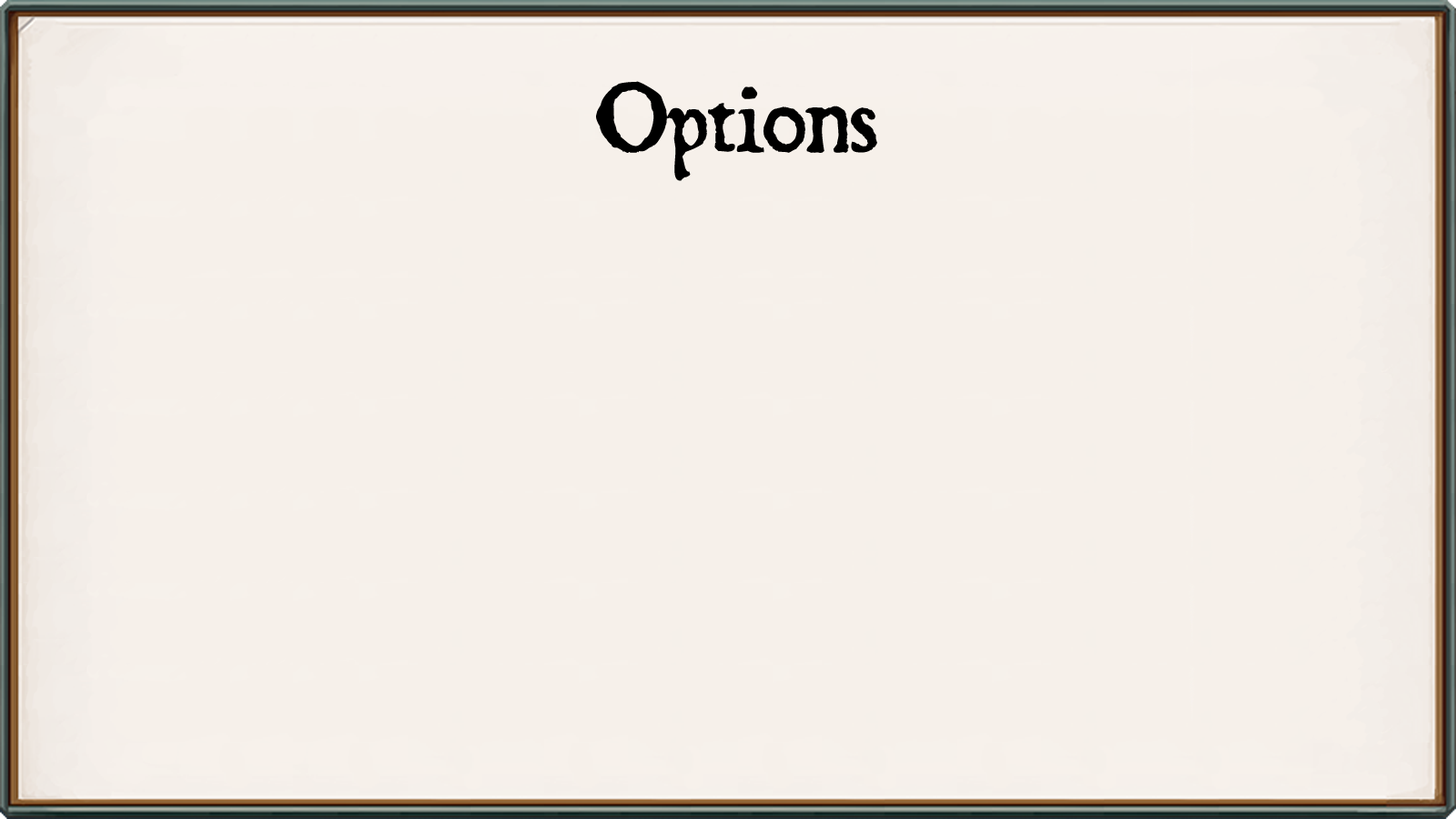
<style>
.page{position:relative;width:1456px;height:819px;background:#f6f0ea}
.page>*{position:absolute;margin:0}
.t1{font:83.7px "Dominican";color:#000000}
</style>
<div class="page">
<p class="t1" style="left:596px;top:81px;width:281px;height:100px">Options</p>
</div>
